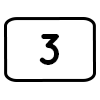
<style>
.page{position:relative;width:100px;height:100px;background:#ffffff}
.page>*{position:absolute;margin:0}
.t1{font:43.7px "QuicksandBold-Regular";color:#000000}
</style>
<div class="page">
<p class="t1" style="left:39px;top:34px;width:20px;height:31px">3</p>
</div>
